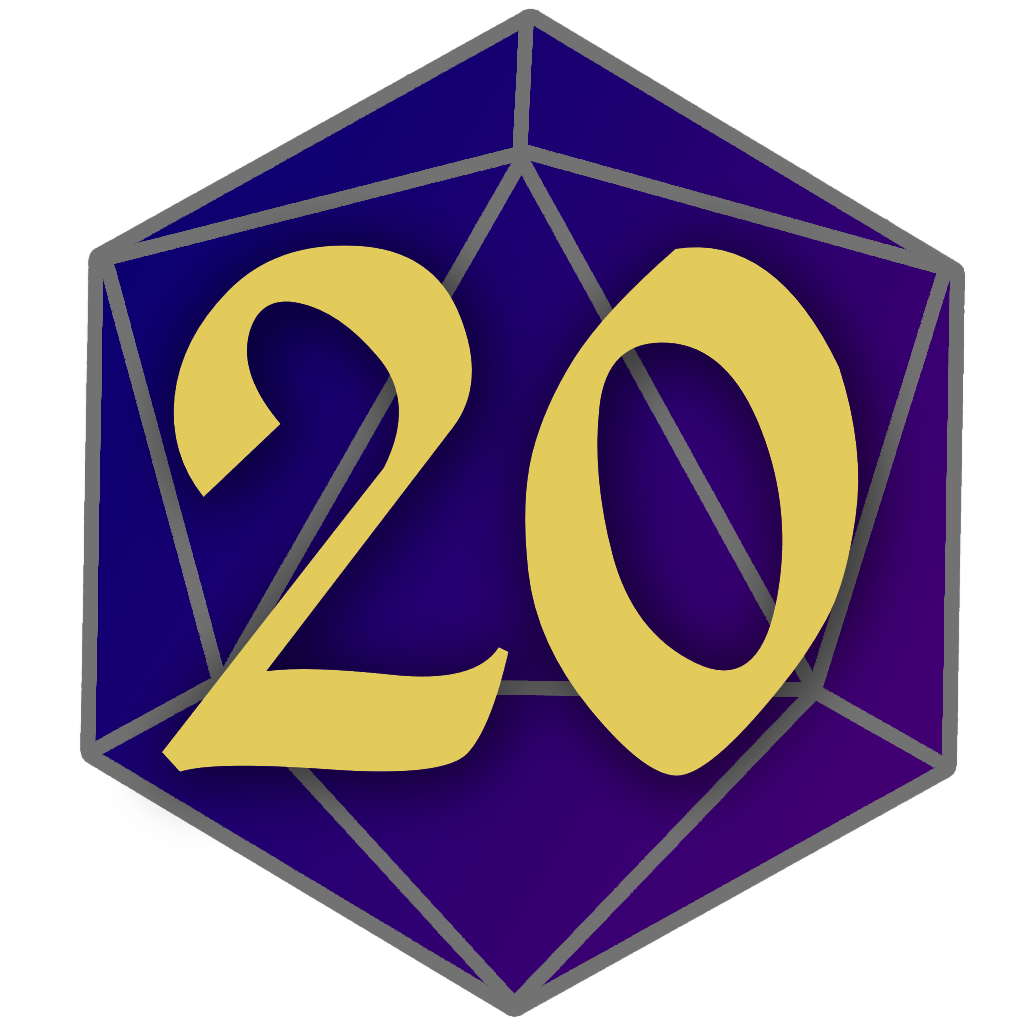
<style>
.page{position:relative;width:1024px;height:1024px;background:#ffffff}
.page>*{position:absolute;margin:0}
.t1{font:806px "KingthingsPetrock";color:#e2ca5b}
</style>
<div class="page">
<p class="t1" style="left:161px;top:233px;width:705px;height:545px">20</p>
</div>
